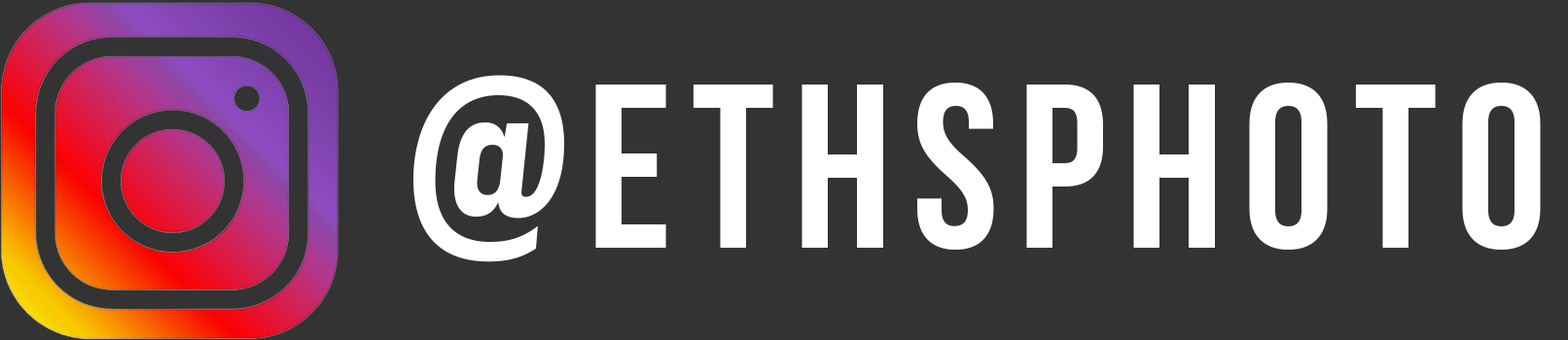
<style>
.page{position:relative;width:1568px;height:340px;background:#333333}
.page>*{position:absolute;margin:0}
.t1{font:233.4px "BebasNeue";letter-spacing:0.08em;color:#ffffff}
</style>
<div class="page">
<p class="t1" style="left:413px;top:75px;width:1128px;height:188px">@ETHSPHOTO</p>
</div>
